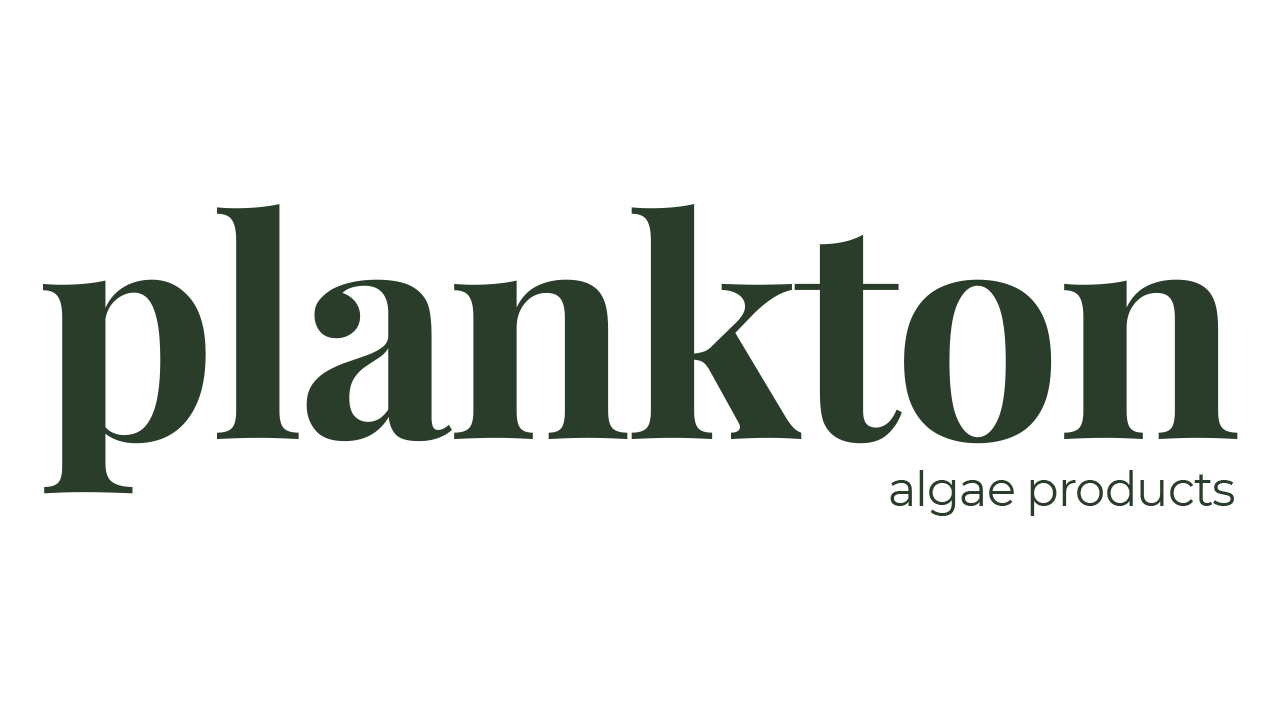
<style>
.page{position:relative;width:1280px;height:720px;background:#ffffff}
.page>*{position:absolute;margin:0}
.t1{font:300px "PlayfairDisplay-Bold";letter-spacing:-0.02em;color:#2a3d2a}
.t2{font:48px "Montserrat-Regular";letter-spacing:-0.02em;color:#2a3d2a}
</style>
<div class="page">
<p class="t1" style="left:43px;top:204px;width:1195px;height:290px">plankton</p>
<p class="t2" style="left:890px;top:470px;width:344px;height:46px">algae products</p>
</div>
